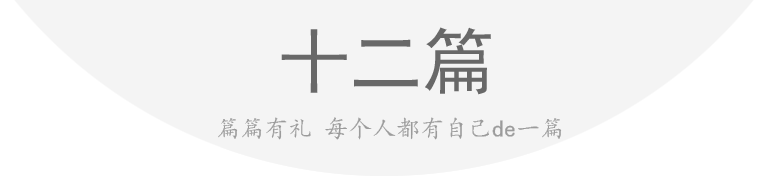
<style>
.page{position:relative;width:768px;height:194px;background:#f4f4f4}
.page>*{position:absolute;margin:0}
.t1{font:72px "SimHei";color:#686868}
.t2{font:24px "¿¬Ìå-Regular";color:#9b9b9b}
</style>
<div class="page">
<p class="t1" style="left:281px;top:27px;width:210px;height:68px">十二篇</p>
<p class="t2" style="left:218px;top:117px;width:344px;height:23px">篇篇有礼 每个人都有自己de一篇</p>
</div>
